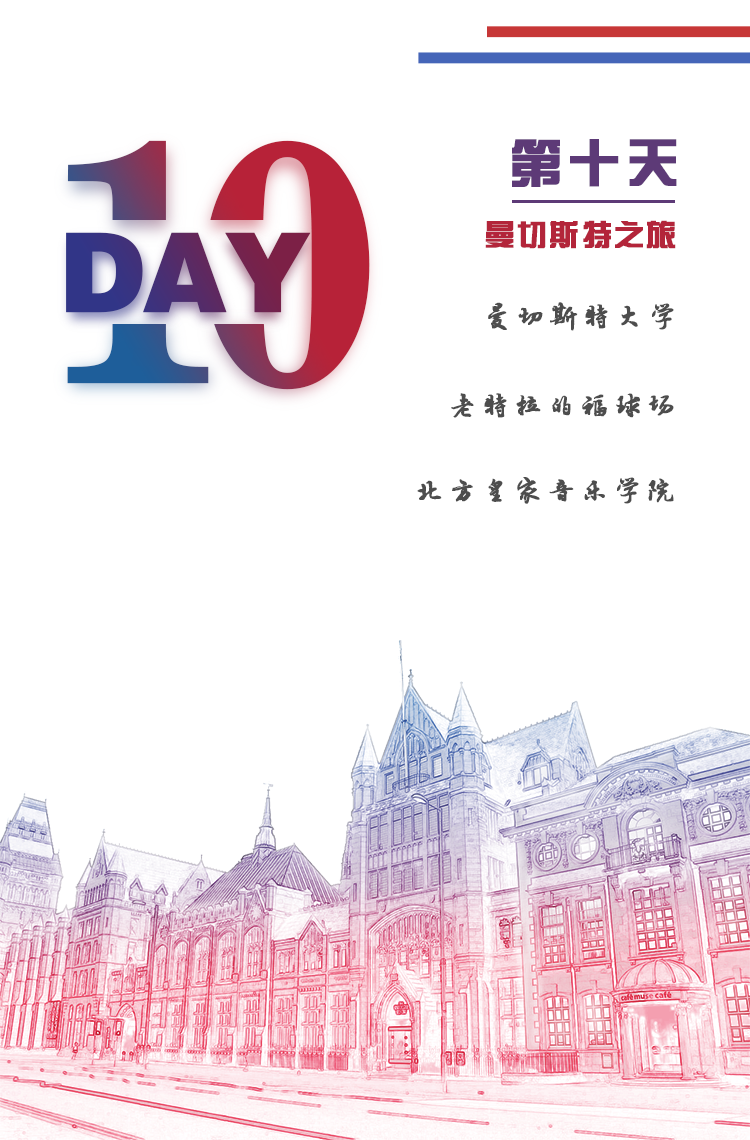
<style>
.page{position:relative;width:750px;height:1140px;background:#ffffff}
.page>*{position:absolute;margin:0}
.t1{font:350px "News706BT-BoldC";letter-spacing:-0.12em;font-weight:bold}
.t2{font:52px "FZZYJW--GB1-0";letter-spacing:0.1em;color:#5d3a77;font-weight:bold}
.t3{font:30px "FZZYJW--GB1-0";letter-spacing:0.05em;color:#b3253a;font-weight:bold}
.t4{font:110.2px "FZCCHJW--GB1-0";letter-spacing:-0.05em;font-weight:bold}
.t5{font:30px "·½ÕýÂÀ½¨µÂ×ÖÌå";letter-spacing:0.075em;color:#4d4d4d;font-weight:bold}
</style>
<div class="page">
<p class="t1" style="left:67px;top:140px;width:303px;height:250px">10</p>
<p class="t2" style="left:512px;top:139px;width:165px;height:48px">第十天</p>
<p class="t3" style="left:485px;top:220px;width:191px;height:29px">曼切斯特之旅</p>
<p class="t4" style="left:66px;top:232px;width:245px;height:81px">DAY</p>
<p class="t5" style="left:488px;top:302px;width:186px;height:29px">曼切斯特大学</p>
<p class="t5" style="left:451px;top:393px;width:223px;height:25px">老特拉的福球场</p>
<p class="t5" style="left:417px;top:477px;width:257px;height:27px">北方皇家音乐学院</p>
</div>
